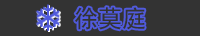
<style>
.page{position:relative;width:200px;height:36px;background:#333333}
.page>*{position:absolute;margin:0}
.t1{font:24px "SimHei";color:#333333}
</style>
<div class="page">
<p class="t1" style="left:75px;top:7px;width:70px;height:23px">徐莫庭</p>
</div>
